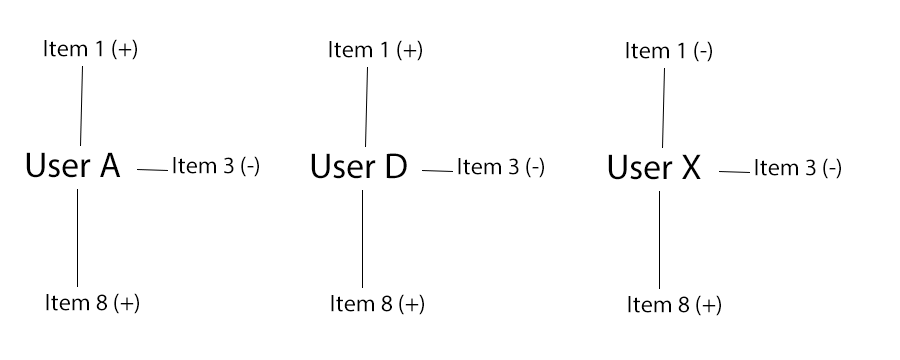
<style>
.page{position:relative;width:900px;height:360px;background:#ffffff}
.page>*{position:absolute;margin:0}
.t1{font:24px "MyriadPro-Regular";color:#000000}
.t2{font:36px "MyriadPro-Regular";color:#000000}
</style>
<div class="page">
<p class="t1" style="left:44px;top:39px;width:93px;height:21px">Item 1 (+)</p>
<p class="t1" style="left:329px;top:40px;width:93px;height:21px">Item 1 (+)</p>
<p class="t1" style="left:626px;top:41px;width:86px;height:21px">Item 1 (-)</p>
<p class="t2" style="left:26px;top:152px;width:95px;height:26px">User A</p>
<p class="t1" style="left:173px;top:156px;width:86px;height:21px">Item 3 (-)</p>
<p class="t2" style="left:311px;top:153px;width:96px;height:26px">User D</p>
<p class="t1" style="left:458px;top:157px;width:86px;height:21px">Item 3 (-)</p>
<p class="t2" style="left:608px;top:154px;width:93px;height:26px">User X</p>
<p class="t1" style="left:755px;top:158px;width:86px;height:21px">Item 3 (-)</p>
<p class="t1" style="left:46px;top:293px;width:93px;height:21px">Item 8 (+)</p>
<p class="t1" style="left:331px;top:294px;width:93px;height:21px">Item 8 (+)</p>
<p class="t1" style="left:628px;top:295px;width:93px;height:21px">Item 8 (+)</p>
</div>
